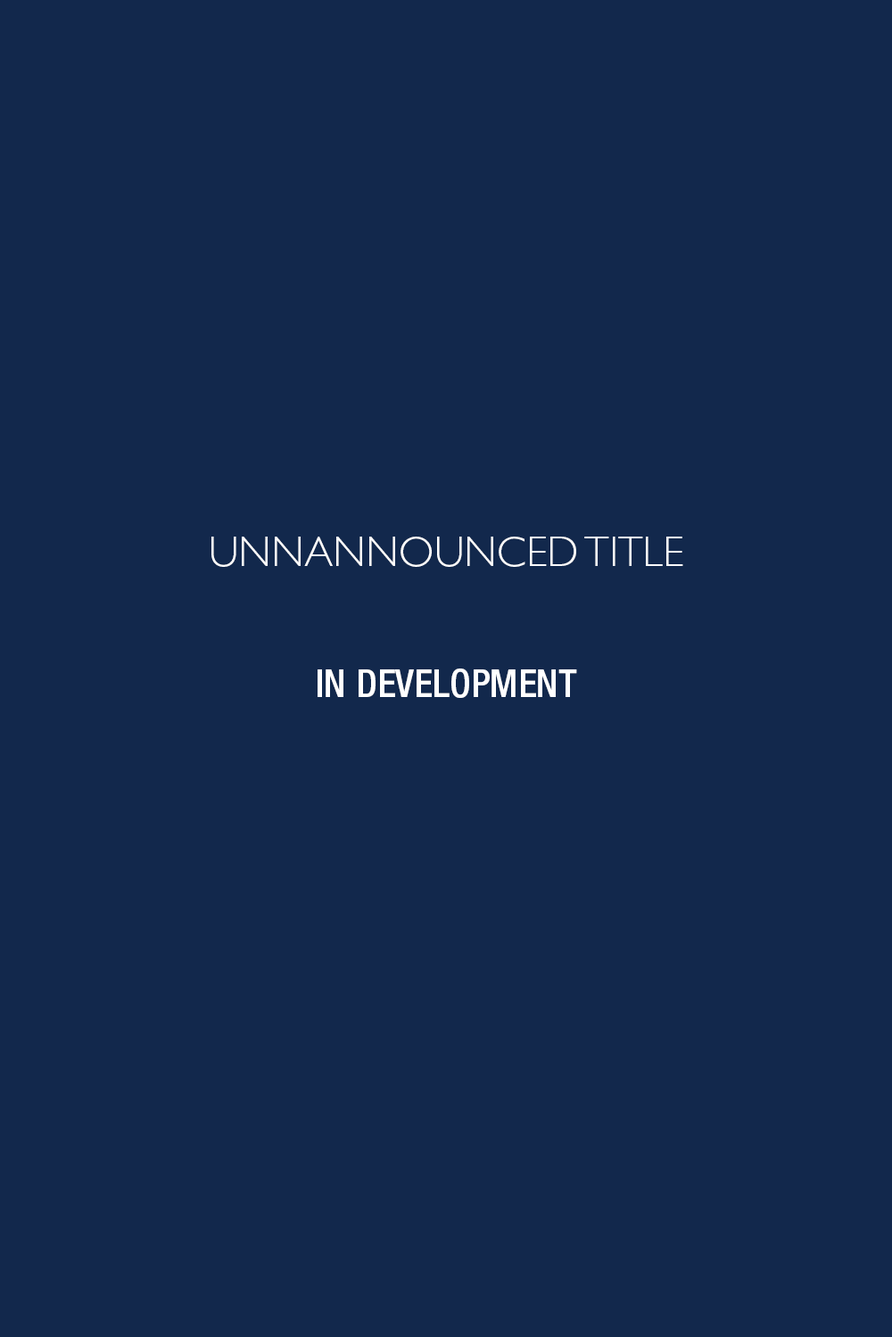
<style>
.page{position:relative;width:892px;height:1337px;background:#12284c}
.page>*{position:absolute;margin:0}
.t1{font:42.8px "GillSans-Light";color:#ffffff}
.t2{font:38.5px "HelveticaNeue-MediumCond";color:#ffffff;text-transform:uppercase}
</style>
<div class="page">
<p class="t1" style="left:211px;top:537px;width:472px;height:30px">UNNANNOUNCED TITLE</p>
<p class="t2" style="left:317px;top:669px;width:260px;height:29px">in DEVELOPMENT</p>
</div>
